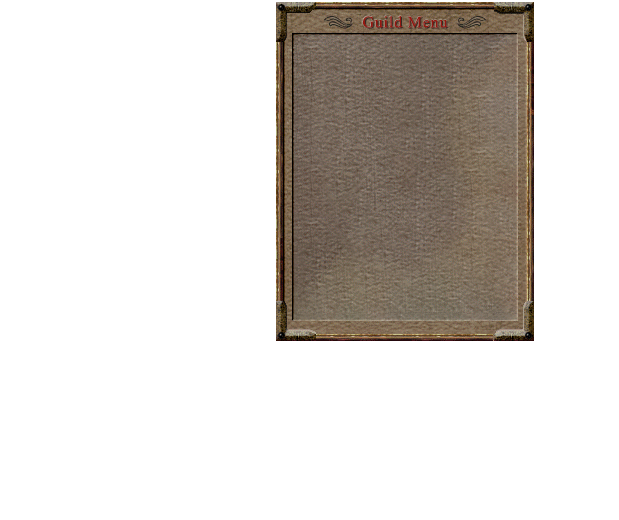
<style>
.page{position:relative;width:619px;height:520px;background:#ffffff}
.page>*{position:absolute;margin:0}
.t1{font:16px "TimesNewRomanPSMT";letter-spacing:0.05em;color:#941810}
.t2{font:16.6px "TimesNewRomanPSMT";letter-spacing:0.05em}
</style>
<div class="page">
<p class="t1" style="left:362px;top:16px;width:86px;height:12px">Guild Menu</p>
<p class="t2" style="left:362px;top:15px;width:86px;height:13px">Guild Menu</p>
</div>
